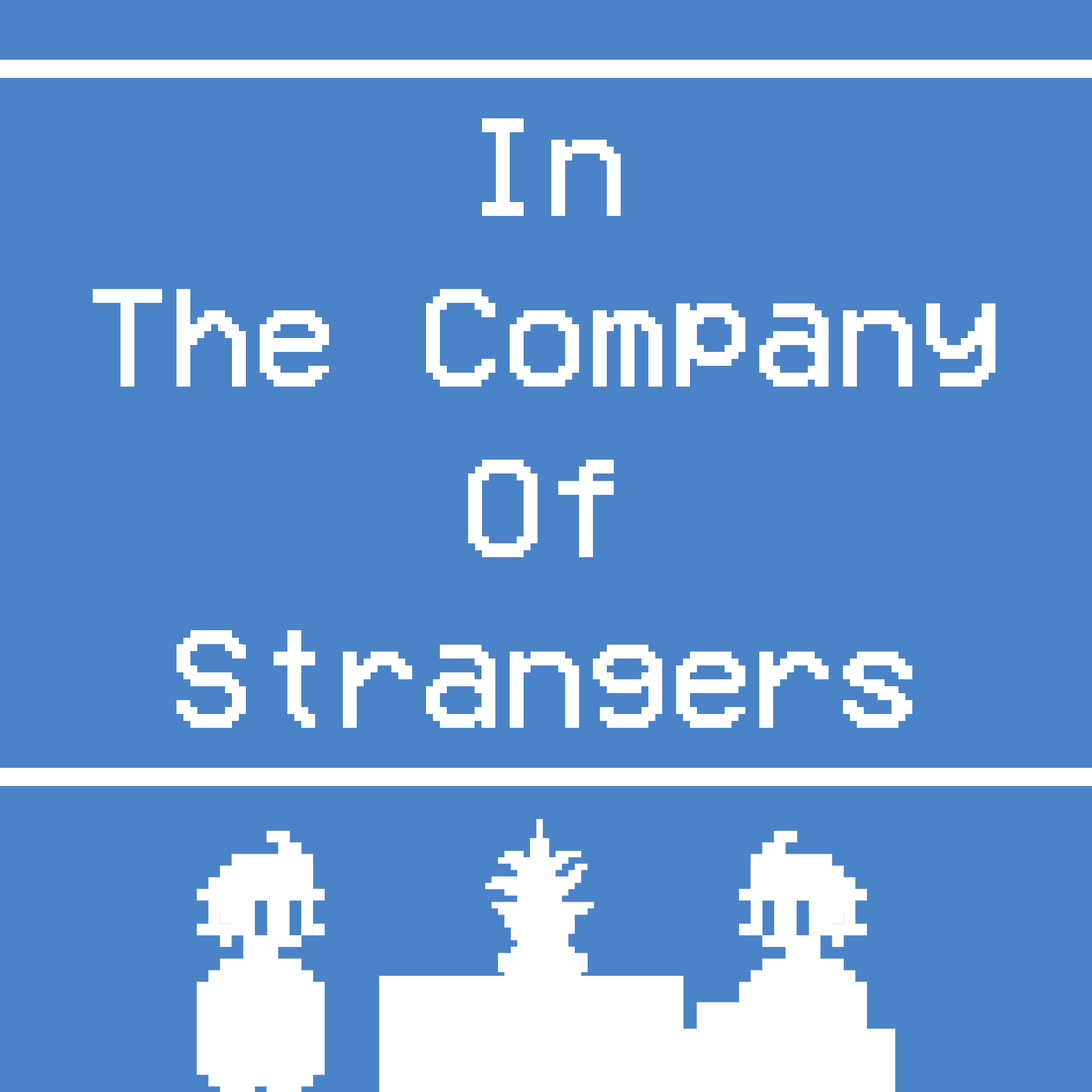
<style>
.page{position:relative;width:1092px;height:1092px;background:#4b83c8}
.page>*{position:absolute;margin:0}
.t1{font:142.2px "VCROSDMono";color:#ffffff}
</style>
<div class="page">
<p class="t1" style="left:93px;top:118px;width:902px;height:610px;text-align:center">In<br>The Company<br>Of<br>Strangers</p>
</div>
